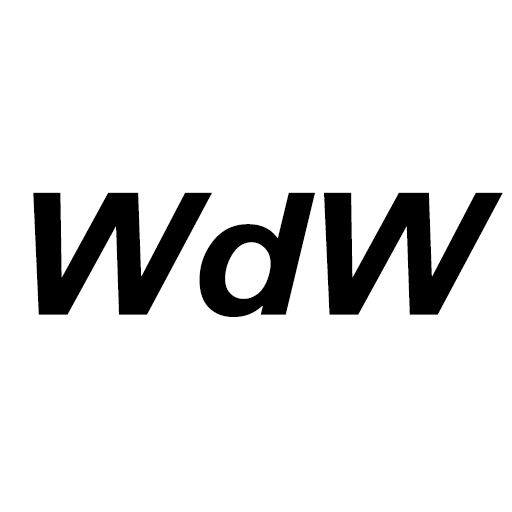
<style>
.page{position:relative;width:512px;height:512px;background:#ffffff}
.page>*{position:absolute;margin:0}
.t1{font:170px "Arial-BoldItalicMT";color:#000000;scale:1.1 1}
</style>
<div class="page">
<p class="t1" style="left:33px;top:192px;width:470px;height:125px">WdW</p>
</div>
